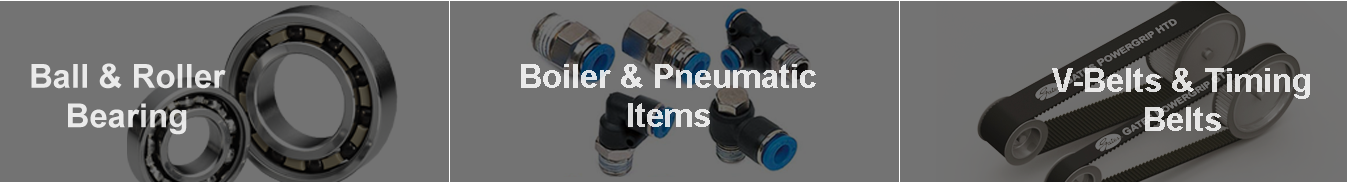
<style>
.page{position:relative;width:1347px;height:182px;background:#737373}
.page>*{position:absolute;margin:0}
.t1{font:33px "Arial-BoldMT";color:#ffffff}
.t2{font:33px "Arial-BoldMT";color:#e5e5e5}
</style>
<div class="page">
<p class="t1" style="left:31px;top:63px;width:195px;height:72px;text-align:center;opacity:0.85">Ball &amp; Roller<br>Bearing</p>
<p class="t1" style="left:521px;top:64px;width:295px;height:63px;text-align:center;opacity:0.85">Boiler &amp; Pneumatic<br>Items</p>
<p class="t2" style="left:1052px;top:68px;width:258px;height:63px;text-align:center">V-Belts &amp; Timing<br>Belts</p>
</div>
